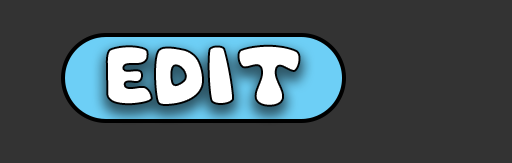
<style>
.page{position:relative;width:512px;height:163px;background:#333333}
.page>*{position:absolute;margin:0}
.t1{font:70.8px "SuperBubble";color:#ffffff;scale:1.05 1}
</style>
<div class="page">
<p class="t1" style="left:105px;top:44px;width:196px;height:63px">Edit</p>
</div>
